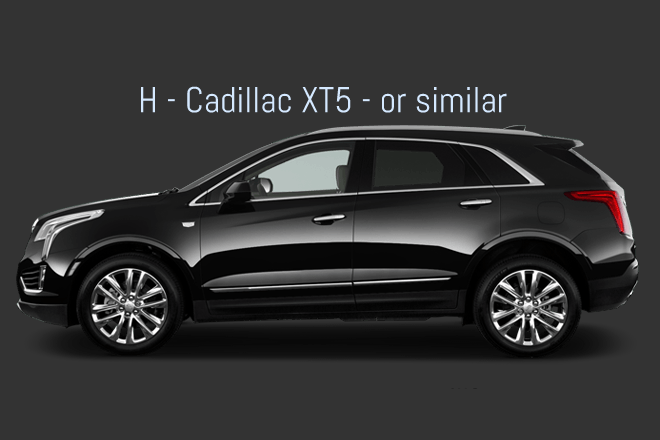
<style>
.page{position:relative;width:660px;height:440px;background:#333333}
.page>*{position:absolute;margin:0}
.t1{font:36px "Abel-Regular";color:#d5e9ff}
</style>
<div class="page">
<p class="t1" style="left:140px;top:86px;width:367px;height:27px">H - Cadillac XT5 - or similar</p>
</div>
